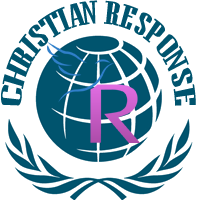
<style>
.page{position:relative;width:197px;height:200px;background:#ffffff}
.page>*{position:absolute;margin:0}
.t1{font:32px "NiagaraEngraved-Reg";color:#00546e;scale:0.91 1}
</style>
<div class="page">
<p class="t1" style="left:1px;top:0px;width:195px;height:106px">CHRISTIAN RESPONSE</p>
</div>
